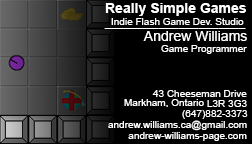
<style>
.page{position:relative;width:252px;height:144px;background:#000000}
.page>*{position:absolute;margin:0}
.t1{font:14px "Arial-BoldMT";color:#ffffff}
.t2{font:12px "ArialMT";color:#ffffff}
.t3{font:10px "ArialMT";color:#ffffff}
.t4{font:14px "ArialMT";color:#ffffff}
</style>
<div class="page">
<p class="t1" style="left:105px;top:3px;width:141px;height:13px">Really Simple Games</p>
<p class="t2" style="left:104px;top:28px;width:142px;height:1px">_____________________</p>
<p class="t3" style="left:111px;top:18px;width:133px;height:7px">Indie Flash Game Dev. Studio</p>
<p class="t4" style="left:143px;top:31px;width:104px;height:10px">Andrew Williams</p>
<p class="t3" style="left:161px;top:45px;width:86px;height:9px">Game Programmer</p>
<p class="t3" style="left:124px;top:99px;width:80px;height:8px">Markham, Ontario</p>
<p class="t3" style="left:152px;top:90px;width:95px;height:7px">43 Cheeseman Drive</p>
<p class="t3" style="left:207px;top:100px;width:40px;height:7px">L3R 3G3</p>
<p class="t3" style="left:182px;top:110px;width:66px;height:9px">(647)882-3373</p>
<p class="t3" style="left:108px;top:120px;width:139px;height:11px">andrew.williams.ca@gmail.com</p>
<p class="t3" style="left:128px;top:132px;width:119px;height:9px">andrew-williams-page.com</p>
</div>
